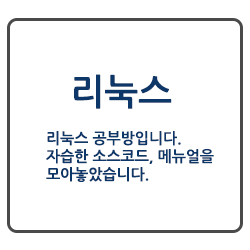
<style>
.page{position:relative;width:250px;height:250px;background:#ffffff}
.page>*{position:absolute;margin:0}
.t1{font:36px "NanumGothicBold";color:#0e3769}
.t2{font:15px "NanumGothicBold";color:#0e3769}
</style>
<div class="page">
<p class="t1" style="left:74px;top:74px;width:98px;height:35px">리눅스</p>
<p class="t2" style="left:46px;top:131px;width:168px;height:51px">리눅스 공부방입니다.<br>자습한 소스코드, 메뉴얼을<br>모아놓았습니다.</p>
</div>
